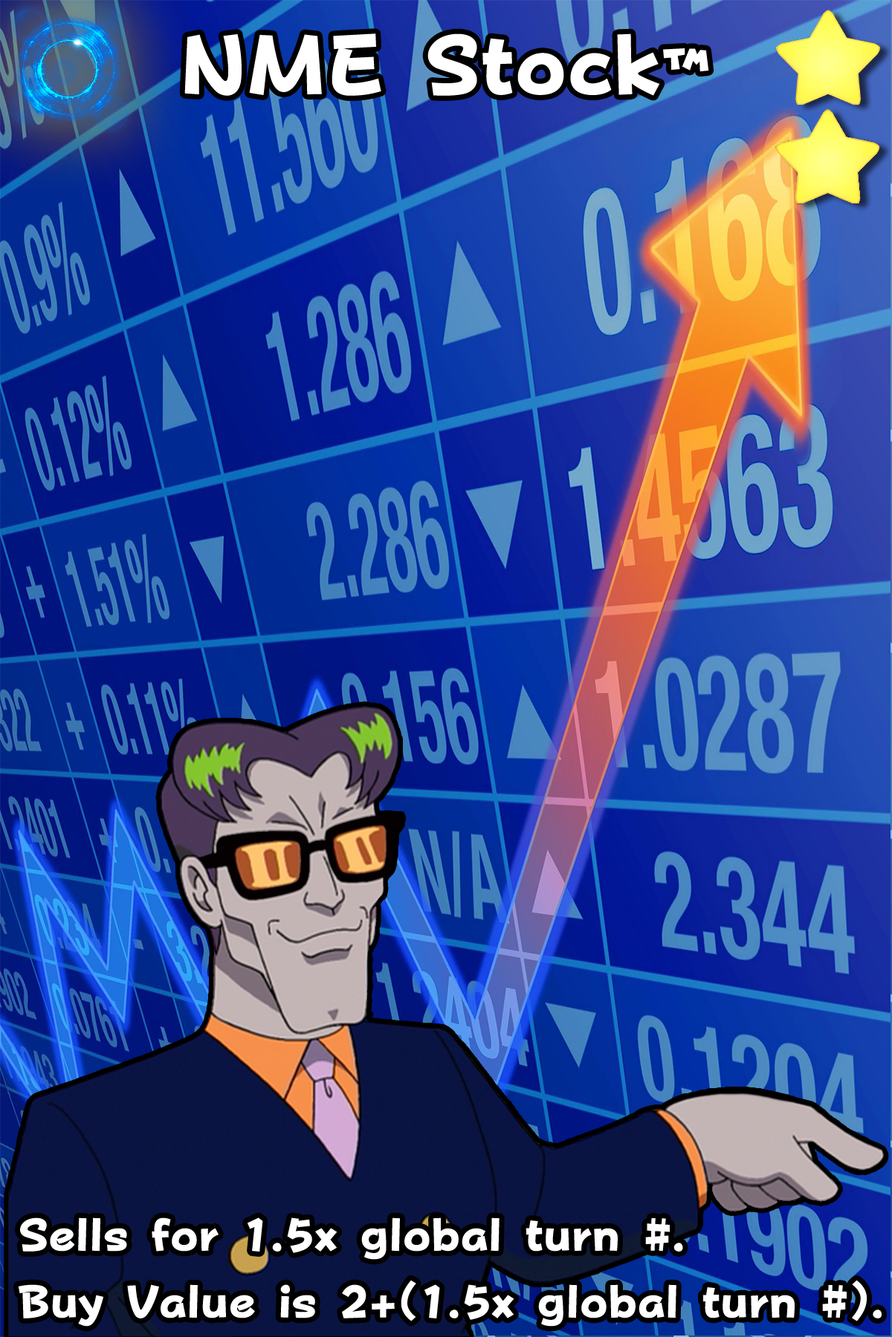
<style>
.page{position:relative;width:892px;height:1337px}
.page>*{position:absolute;margin:0}
.t1{font:144.1px "FOTPopHappinessStrp-ExtraBold";color:#ffffff}
.t2{font:144.1px "SuperMario";color:#ffffff}
.t3{font:78px/66.9px "FOTPopHappinessStrp-ExtraBold";color:#ffffff}
</style>
<div class="page">
<p class="t1" style="left:184px;top:33px;width:525px;height:63px">NME Stock<span class="t2">™</span></p>
<p class="t3" style="left:18px;top:1218px;width:863px;height:109px">Sells for 1.5x global turn #.<br>Buy Value is 2+(1.5x global turn #).</p>
</div>
